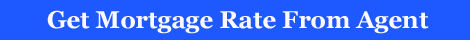
<style>
.page{position:relative;width:470px;height:40px;background:#1e59ff}
.page>*{position:absolute;margin:0}
.t1{font:24px "Georgia-Bold";color:#fbfaff}
</style>
<div class="page">
<p class="t1" style="left:47px;top:10px;width:382px;height:24px">Get Mortgage Rate From Agent</p>
</div>
